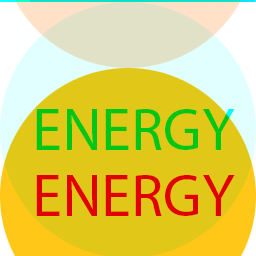
<style>
.page{position:relative;width:256px;height:256px;background:#e1c717}
.page>*{position:absolute;margin:0}
.t1{font:60px "MyriadPro-Regular";color:#00c717}
</style>
<div class="page">
<p class="t1" style="left:36px;top:107px;width:199px;height:41px">ENERGY</p>
</div>
